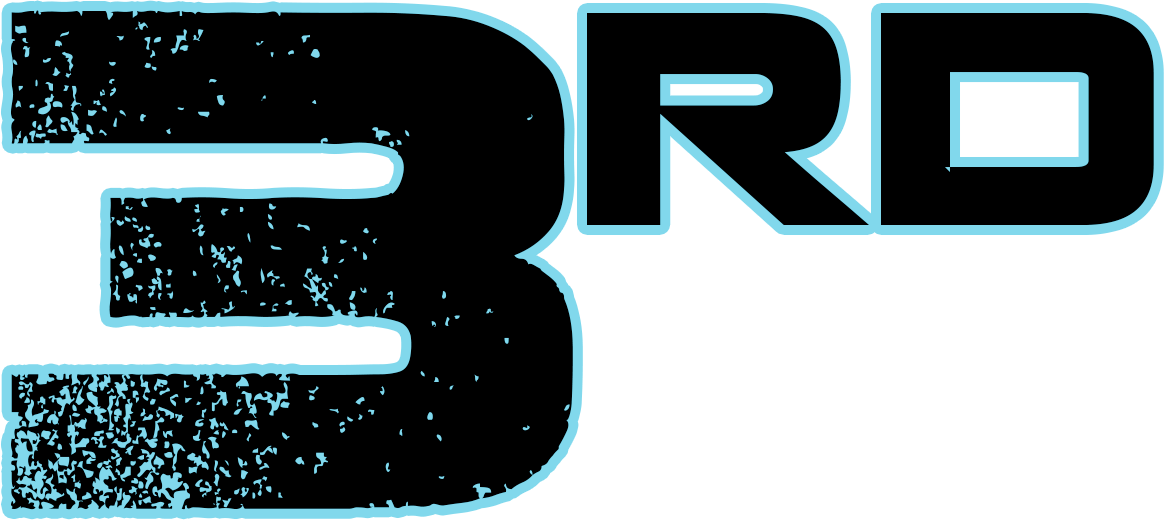
<style>
.page{position:relative;width:1164px;height:520px;background:#000000}
.page>*{position:absolute;margin:0}
.t1{font:700px "Coalition";color:#000000}
.t2{font:300px "Coalition";color:#000000}
</style>
<div class="page">
<p class="t1" style="left:10px;top:10px;width:563px;height:500px">3</p>
<p class="t2" style="left:587px;top:13px;width:567px;height:212px">rd</p>
</div>
